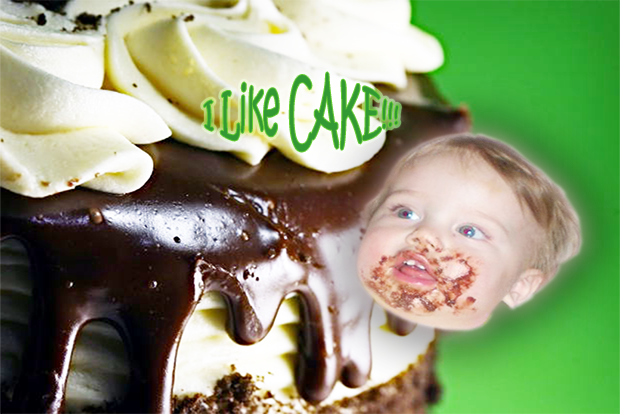
<style>
.page{position:relative;width:620px;height:414px}
.page>*{position:absolute;margin:0}
.t1{font:24.3px "KristenITC-Regular";color:#339933;scale:1.12 1}
</style>
<div class="page">
<p class="t1" style="left:204px;top:72px;width:195px;height:80px">I Like CAKE!!!</p>
</div>
